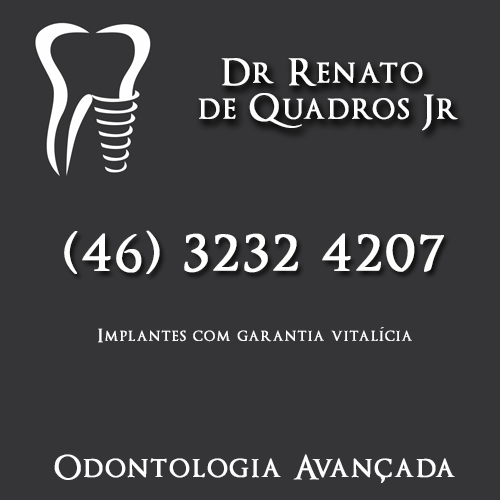
<style>
.page{position:relative;width:500px;height:500px;background:#353537}
.page>*{position:absolute;margin:0}
.t1{font:36px/36px "OptimusPrinceps";letter-spacing:0.05em;color:#fefdfd;font-weight:bold}
.t2{font:60px "OptimusPrinceps";letter-spacing:0.05em;color:#fefdfd;font-weight:bold}
.t3{font:18px "OptimusPrinceps";letter-spacing:0.05em;color:#fefdfd;font-weight:bold}
.t4{font:32.3px "OptimusPrinceps";letter-spacing:0.05em;color:#fefdfd;font-weight:bold}
.t5{font:36px "OptimusPrinceps";letter-spacing:0.05em;color:#fefdfd;font-weight:bold}
</style>
<div class="page">
<p class="t1" style="left:198px;top:58px;width:260px;height:73px;text-align:center">Dr Renato <br>de Quadros Jr</p>
<p class="t2" style="left:64px;top:230px;width:380px;height:44px">(46) 3232 4207</p>
<p class="t3" style="left:98px;top:328px;width:314px;height:15px">Implantes com garantia vitalicia</p>
<p class="t3" style="left:380px;top:327px;width:4px;height:2px">´</p>
<p class="t4" style="left:54px;top:454px;width:401px;height:26px">Odontologia Avancada</p>
<p class="t5" style="left:380px;top:475px;width:5px;height:8px">,</p>
</div>
